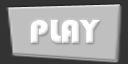
<style>
.page{position:relative;width:128px;height:64px;background:#bfbfbf}
.page>*{position:absolute;margin:0}
.t1{font:35px "Bauhaus93";color:#ffffff}
</style>
<div class="page">
<p class="t1" style="left:30px;top:20px;width:70px;height:23px">PLAY</p>
</div>
